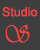
<style>
.page{position:relative;width:40px;height:50px;background:#3e3e3e}
.page>*{position:absolute;margin:0}
.t1{font:12.5px "ArialMT";color:#fd4545}
.t2{font:25px "Vivaldii";color:#fd4545;scale:0.86 1}
</style>
<div class="page">
<p class="t1" style="left:2px;top:7px;width:36px;height:10px">Studio</p>
<p class="t2" style="left:5px;top:24px;width:25px;height:19px">S</p>
</div>
